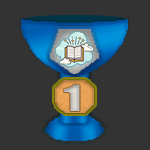
<style>
.page{position:relative;width:150px;height:150px;background:#333333}
.page>*{position:absolute;margin:0}
.t1{font:33.1px "Impact";color:#c9c6c1;scale:1.35 1}
</style>
<div class="page">
<p class="t1" style="left:64px;top:84px;width:16px;height:27px">1</p>
</div>
